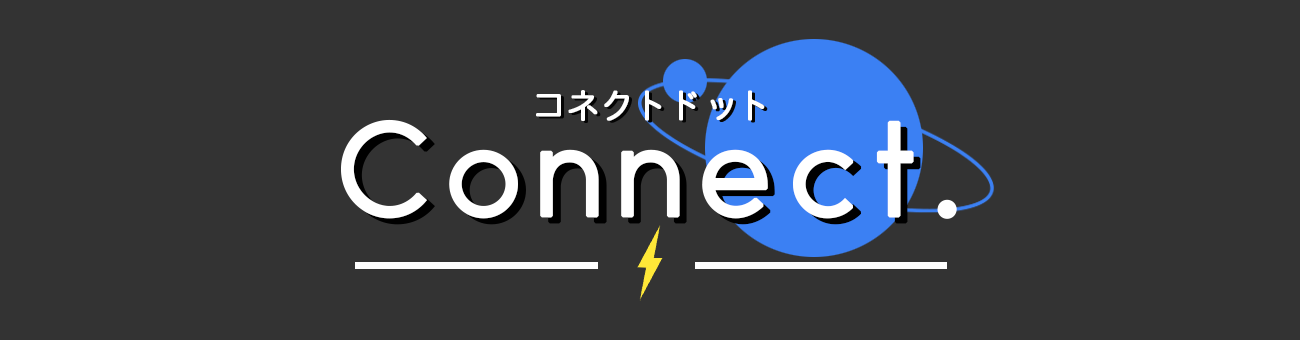
<style>
.page{position:relative;width:1300px;height:340px;background:#333333}
.page>*{position:absolute;margin:0}
.t1{font:33.6px "HeiseiMaruGoStd-W4";color:#ffffff;font-weight:bold}
.t2{font:125.9px "Makinas-4-Flat";letter-spacing:0.1em;color:#ffffff;font-weight:bold}
</style>
<div class="page">
<p class="t1" style="left:536px;top:90px;width:229px;height:31px">コネクトドット</p>
<p class="t2" style="left:341px;top:119px;width:616px;height:100px">Connect.</p>
</div>
